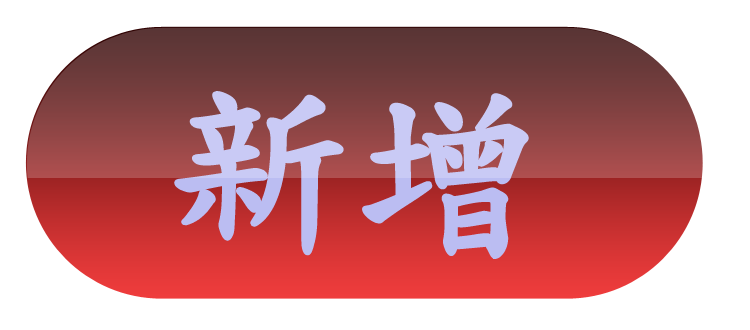
<style>
.page{position:relative;width:750px;height:330px;background:#ffffff}
.page>*{position:absolute;margin:0}
.t1{font:187.5px "DFKaiShu-SB-Estd-BF";color:#bbbdf2;font-weight:bold}
</style>
<div class="page">
<p class="t1" style="left:174px;top:91px;width:355px;height:168px">新增</p>
</div>
